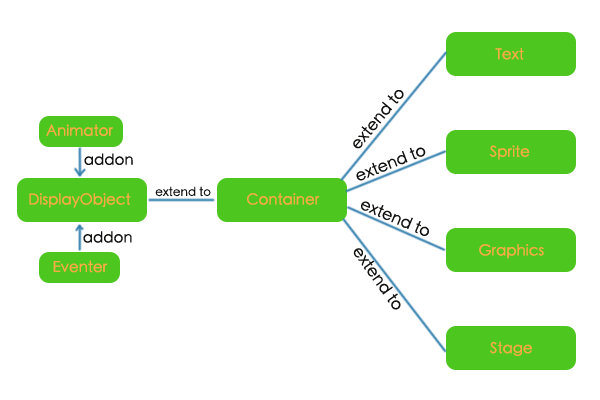
<style>
.page{position:relative;width:600px;height:400px;background:#ffffff}
.page>*{position:absolute;margin:0}
.t1{font:15px "STHeitiSC-Light";color:#fda945}
.t2{font:16px "STHeitiSC-Light";color:#10100f}
.t3{font:15px "STHeitiSC-Light";color:#10100f}
.t4{font:12px "STHeitiSC-Light";color:#10100f}
</style>
<div class="page">
<p class="t1" style="left:495px;top:48px;width:29px;height:12px">Text</p>
<p class="t2" style="left:353px;top:90px;width:51px;height:59px;rotate:-50deg">extend to</p>
<p class="t1" style="left:46px;top:124px;width:67px;height:12px">Animator</p>
<p class="t2" style="left:356px;top:147px;width:70px;height:34px;rotate:-22deg">extend to</p>
<p class="t1" style="left:489px;top:145px;width:41px;height:15px">Sprite</p>
<p class="t3" style="left:84px;top:153px;width:49px;height:12px">addon</p>
<p class="t1" style="left:29px;top:193px;width:102px;height:15px">DisplayObject</p>
<p class="t4" style="left:155px;top:186px;width:56px;height:11px">extend to</p>
<p class="t1" style="left:247px;top:193px;width:73px;height:12px">Container</p>
<p class="t2" style="left:361px;top:201px;width:68px;height:35px;rotate:23deg">extend to</p>
<p class="t3" style="left:83px;top:231px;width:49px;height:12px">addon</p>
<p class="t1" style="left:479px;top:244px;width:65px;height:15px">Graphics</p>
<p class="t2" style="left:353px;top:248px;width:48px;height:62px;rotate:54deg">extend to</p>
<p class="t1" style="left:53px;top:260px;width:55px;height:13px">Eventer</p>
<p class="t1" style="left:490px;top:341px;width:42px;height:15px">Stage</p>
</div>
